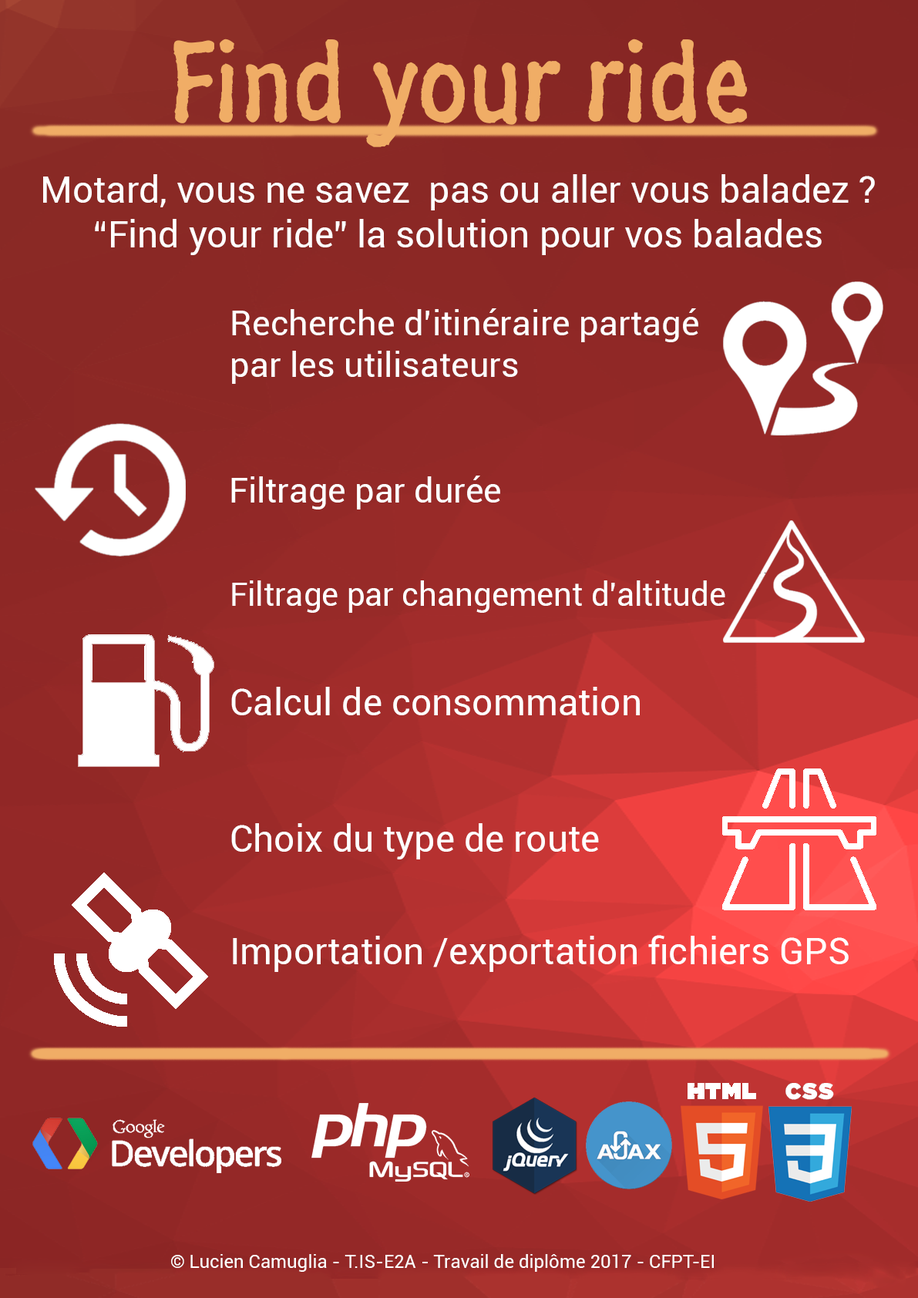
<style>
.page{position:relative;width:918px;height:1298px}
.page>*{position:absolute;margin:0}
.t1{font:115.7px "SegoeMarker";color:#f0ad66}
.t2{font:37px "Roboto-Regular";color:#ffffff}
.t3{font:35px "Roboto-Regular";color:#ffffff}
.t4{font:34.6px "Roboto-Regular";color:#ffffff}
.t5{font:32.3px "Roboto-Regular";color:#ffffff}
.t6{font:18.5px "Roboto-Regular";color:#fefefe}
</style>
<div class="page">
<p class="t1" style="left:173px;top:39px;width:575px;height:108px">Find your ride</p>
<p class="t2" style="left:43px;top:174px;width:832px;height:81px;text-align:center">Motard, vous ne savez  pas ou aller vous baladez ?<br>“Find your ride” la solution pour vos balades</p>
<p class="t3" style="left:232px;top:308px;width:467px;height:76px">Recherche d’itinéraire partagé par les utilisateurs</p>
<p class="t4" style="left:231px;top:476px;width:269px;height:34px">Filtrage par durée</p>
<p class="t5" style="left:232px;top:581px;width:494px;height:32px">Filtrage par changement d’altitude</p>
<p class="t2" style="left:231px;top:687px;width:409px;height:29px">Calcul de consommation</p>
<p class="t2" style="left:231px;top:823px;width:368px;height:37px">Choix du type de route</p>
<p class="t2" style="left:233px;top:935px;width:616px;height:37px">Importation /exportation fichiers GPS</p>
<p class="t6" style="left:171px;top:1255px;width:543px;height:17px">© Lucien Camuglia - T.IS-E2A - Travail de diplôme 2017 - CFPT-EI</p>
</div>
